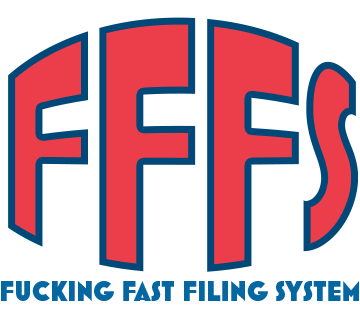
<style>
.page{position:relative;width:360px;height:313px;background:#ffffff}
.page>*{position:absolute;margin:0}
.t1{font:200px "MostraNuova-Heavy";letter-spacing:-0.05em;color:#eb3e4a}
.t2{font:28px "MostraNuova-Heavy";letter-spacing:0.005em;color:#0567a1}
</style>
<div class="page">
<p class="t1" style="left:8px;top:17px;width:350px;height:255px">FFFS</p>
<p class="t2" style="left:1px;top:281px;width:358px;height:20px">FUCKING FAST FILING SYSTEM</p>
</div>
